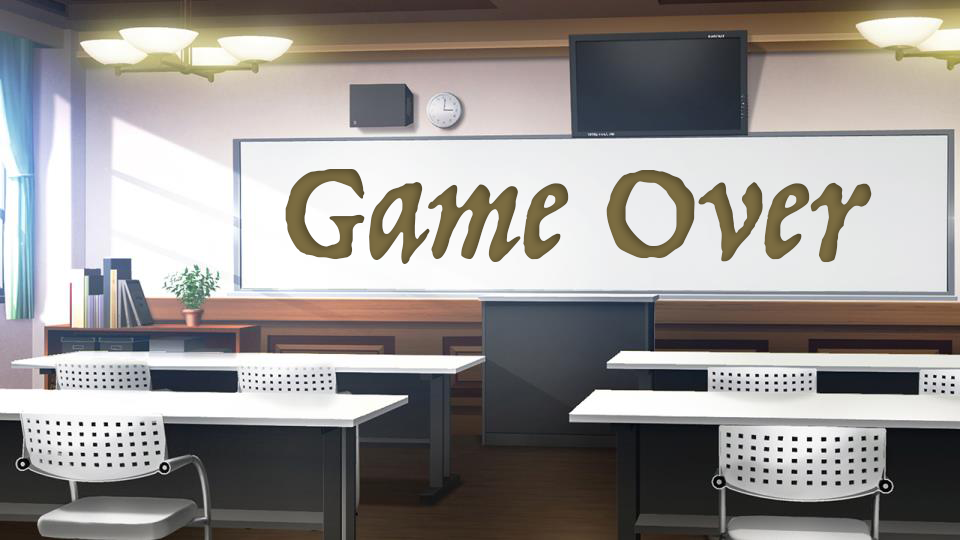
<style>
.page{position:relative;width:960px;height:540px}
.page>*{position:absolute;margin:0}
.t1{font:154.7px "Trattatello";color:#74663d}
</style>
<div class="page">
<p class="t1" style="left:285px;top:169px;width:587px;height:95px">Game Over</p>
</div>
